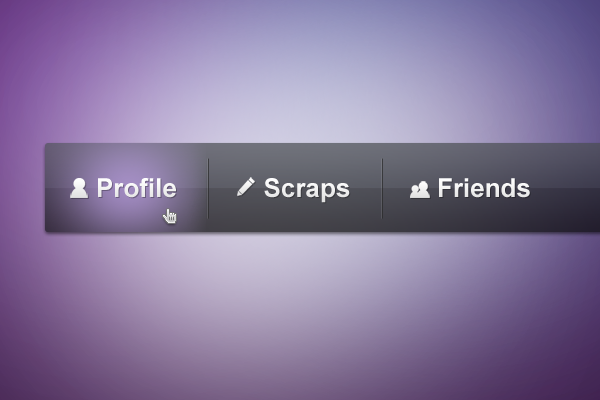
<style>
.page{position:relative;width:600px;height:400px}
.page>*{position:absolute;margin:0}
.t1{font:26px "Arial-BoldMT";color:#ffffff}
</style>
<div class="page">
<p class="t1" style="left:98px;top:178px;width:432px;height:25px">Profile            Scraps            Friends</p>
</div>
